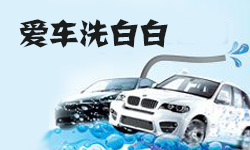
<style>
.page{position:relative;width:250px;height:150px;background:#daf0fb}
.page>*{position:absolute;margin:0}
.t1{font:30px "FZJZJW--GB1-0";color:#1b1c1c}
</style>
<div class="page">
<p class="t1" style="left:19px;top:19px;width:149px;height:29px">爱车洗白白</p>
</div>
